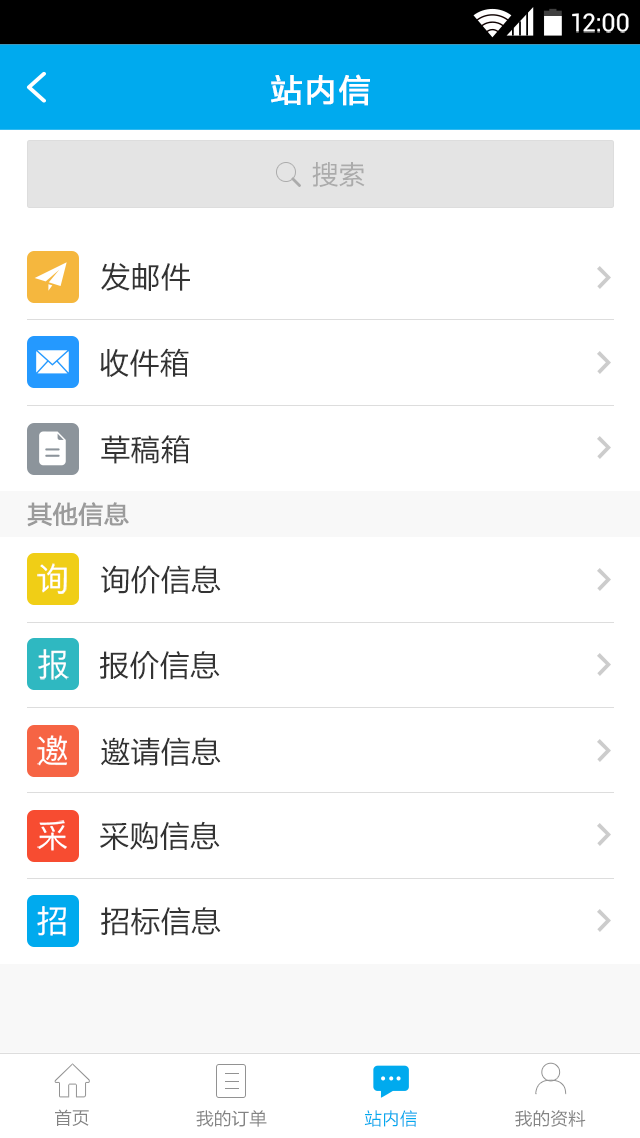
<style>
.page{position:relative;width:640px;height:1138px;background:#ffffff}
.page>*{position:absolute;margin:0}
.t1{font:24.9px "Roboto-Regular";color:#ffffff}
.t2{font:32px "FZLTHJW--GB1-0";letter-spacing:0.02em;color:#ffffff;font-weight:bold}
.t3{font:26.7px "FZLTHJW--GB1-0";color:#ababab}
.t4{font:30.2px "FZLTHJW--GB1-0";color:#333333}
.t5{font:24.9px "FZLTHJW--GB1-0";color:#9b9b9b;font-weight:bold}
.t6{font:32px "PingFang-SC-Medium";color:#ffffff}
.t7{font:17.8px "FZLTHJW--GB1-0";color:#848484}
.t8{font:17.8px "FZLTHJW--GB1-0";color:#00aaee}
</style>
<div class="page">
<p class="t1" style="left:572px;top:13px;width:57px;height:20px">12:00</p>
<p class="t2" style="left:271px;top:74px;width:99px;height:32px">站内信</p>
<p class="t3" style="left:312px;top:162px;width:53px;height:25px">搜索</p>
<p class="t4" style="left:101px;top:262px;width:89px;height:29px">发邮件</p>
<p class="t4" style="left:100px;top:348px;width:89px;height:29px">收件箱</p>
<p class="t4" style="left:101px;top:435px;width:89px;height:29px">草稿箱</p>
<p class="t5" style="left:27px;top:502px;width:102px;height:25px">其他信息</p>
<p class="t6" style="left:37px;top:563px;width:30px;height:31px">询</p>
<p class="t4" style="left:101px;top:565px;width:120px;height:29px">询价信息</p>
<p class="t6" style="left:38px;top:649px;width:31px;height:31px">报</p>
<p class="t4" style="left:100px;top:651px;width:120px;height:29px">报价信息</p>
<p class="t6" style="left:37px;top:735px;width:30px;height:31px">邀</p>
<p class="t4" style="left:101px;top:737px;width:120px;height:29px">邀请信息</p>
<p class="t6" style="left:37px;top:820px;width:30px;height:31px">采</p>
<p class="t4" style="left:100px;top:821px;width:120px;height:29px">采购信息</p>
<p class="t6" style="left:37px;top:906px;width:29px;height:30px">招</p>
<p class="t4" style="left:101px;top:907px;width:120px;height:29px">招标信息</p>
<p class="t7" style="left:55px;top:1109px;width:34px;height:17px">首页</p>
<p class="t7" style="left:196px;top:1110px;width:71px;height:17px">我的订单</p>
<p class="t8" style="left:364px;top:1110px;width:53px;height:17px">站内信</p>
<p class="t7" style="left:515px;top:1110px;width:71px;height:17px">我的资料</p>
</div>
